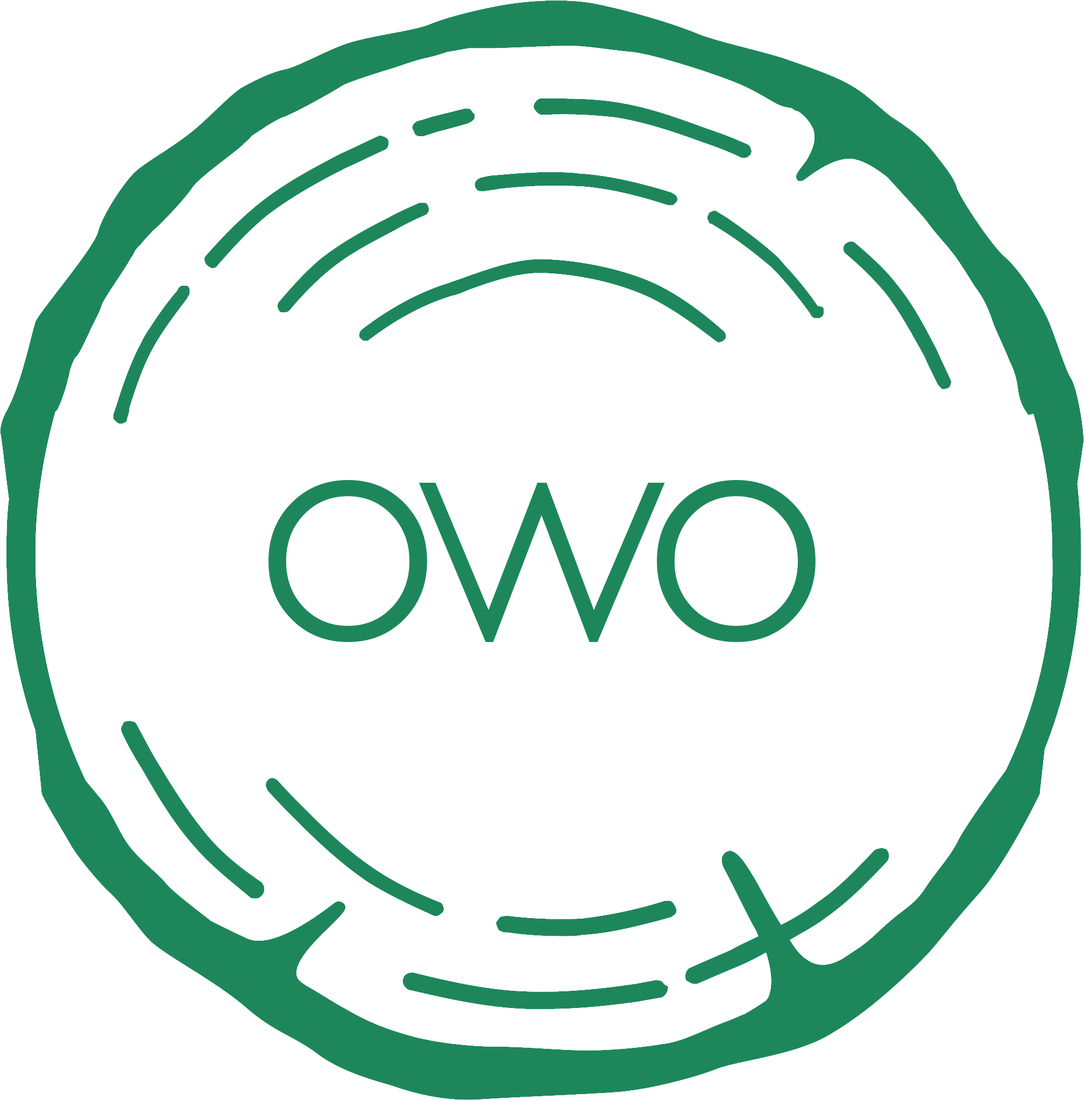
<style>
.page{position:relative;width:1084px;height:1100px;background:#ffffff}
.page>*{position:absolute;margin:0}
.t1{font:347.1px "GillSans-Light";letter-spacing:-0.05em;color:#1d875b}
</style>
<div class="page">
<p class="t1" style="left:268px;top:480px;width:548px;height:162px">owo</p>
</div>
